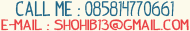
<style>
.page{position:relative;width:190px;height:31px;background:#fcfaeb}
.page>*{position:absolute;margin:0}
.t1{font:16.4px "IndyPimp";color:#216788}
.t2{font:11.5px "IndyPimp";color:#ea4144;scale:1.39 1}
</style>
<div class="page">
<p class="t1" style="left:15px;top:1px;width:159px;height:16px">CALL ME : 085814770661</p>
<p class="t2" style="left:1px;top:19px;width:188px;height:12px">E-MAIL : SHOHIB13@GMAIL.COM</p>
</div>
